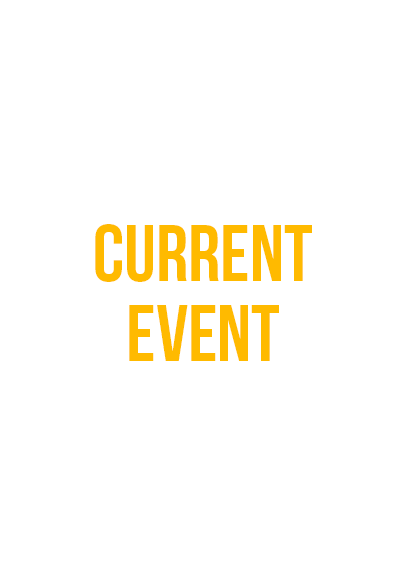
<style>
.page{position:relative;width:408px;height:585px;background:#ffffff}
.page>*{position:absolute;margin:0}
.t1{font:80px/80px "BebasNeue";color:#ffba00}
</style>
<div class="page">
<p class="t1" style="left:95px;top:224px;width:217px;height:137px;text-align:center">current<br>event</p>
</div>
